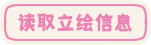
<style>
.page{position:relative;width:151px;height:45px;background:#f7f3e9}
.page>*{position:absolute;margin:0}
.t1{font:12px "shetumodengxiaofangti";color:#eb84b4;font-weight:bold;scale:0.94 1}
</style>
<div class="page">
<p class="t1" style="left:18px;top:13px;width:114px;height:19px">读取立绘信息</p>
</div>
